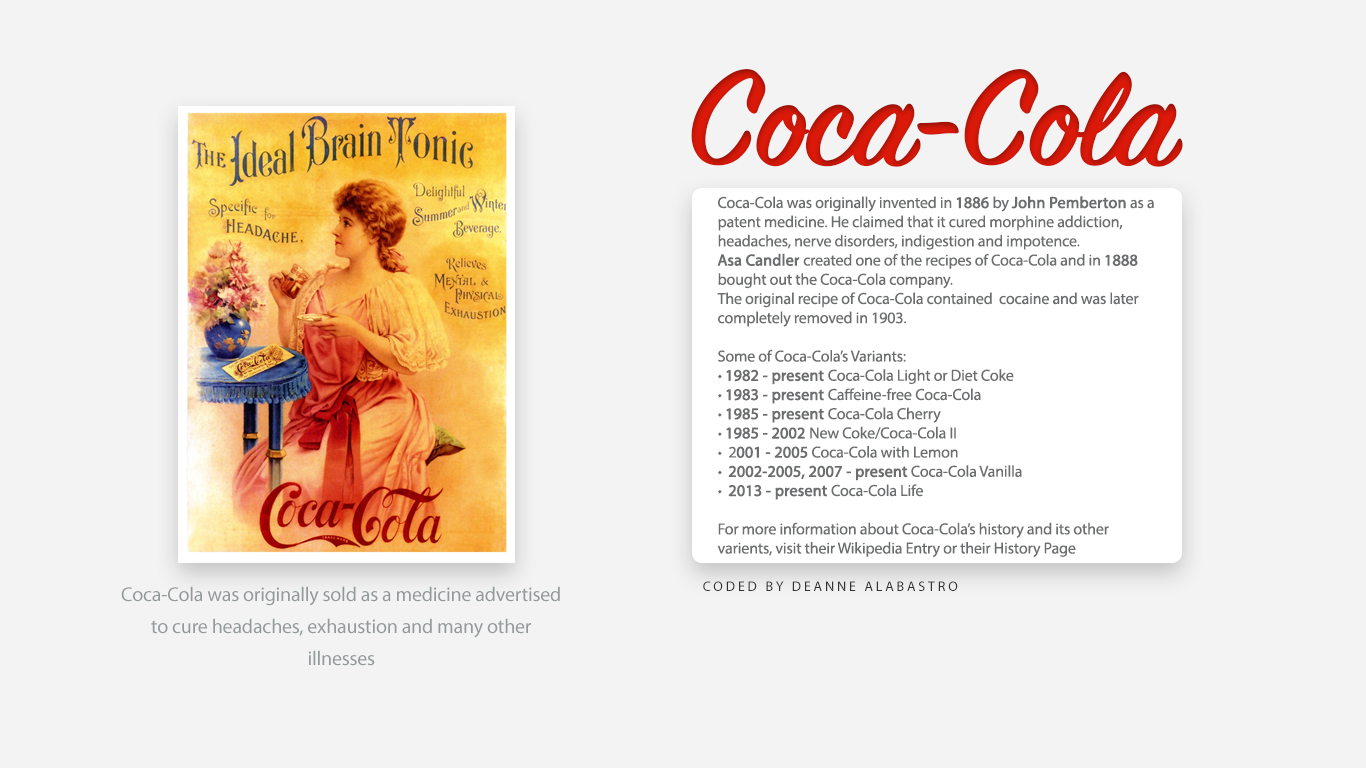
<style>
.page{position:relative;width:1366px;height:768px;background:#f3f3f3}
.page>*{position:absolute;margin:0}
.t1{font:150px "SignPainter-HouseScriptSemibold";color:#dc1909}
.t2{font:16px "MyriadPro-Regular";letter-spacing:-0.01em;color:#6c6d6e}
.t3{font:16px "MyriadPro-Regular";letter-spacing:-0.01em;color:#6c6d6e;font-weight:bold}
.t4{font:14px "MyriadPro-Regular";letter-spacing:0.2em;color:#303234;text-transform:uppercase}
.t5{font:20px/32px "MyriadPro-Regular";letter-spacing:-0.01em;color:#939a9b}
</style>
<div class="page">
<p class="t1" style="left:691px;top:69px;width:492px;height:98px">Coca-Cola</p>
<p class="t2" style="left:717px;top:196px;width:437px;height:362px">Coca-Cola was originally invented in <span class="t3">1886</span> by <span class="t3">John Pemberton</span> as a patent medicine. He claimed that it cured morphine addiction, headaches, nerve disorders, indigestion and impotence.  <br><span class="t3">Asa Candler </span>created one of the recipes of Coca-Cola and in <span class="t3">1888 </span>bought out the Coca-Cola company.<br>The original recipe of Coca-Cola contained  cocaine and was later completely removed in 1903.<br><br>Some of Coca-Cola’s Variants:<br>• <span class="t3">1982 - present </span>Coca-Cola Light or Diet Coke<br>• <span class="t3">1983 - present </span>Caffeine-free Coca-Cola <br>• <span class="t3">1985 - present </span>Coca-Cola Cherry<br>• <span class="t3">1985 - 2002 </span>New Coke/Coca-Cola II <br>•  2<span class="t3">001 - 2005</span> Coca-Cola with Lemon<br>•  <span class="t3">2002-2005, 2007 - present</span> Coca-Cola Vanilla<br>•  <span class="t3">2013 - present </span>Coca-Cola Life<br><br>For more information about Coca-Cola’s history and its other varients, visit their Wikipedia Entry or their History Page</p>
<p class="t4" style="left:703px;top:581px;width:255px;height:10px">Coded by deanne alabastro</p>
<p class="t5" style="left:121px;top:586px;width:439px;height:80px;text-align:center">Coca-Cola was originally sold as a medicine advertised to cure headaches, exhaustion and many other illnesses</p>
</div>
